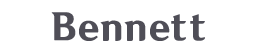
<style>
.page{position:relative;width:256px;height:56px;background:#ffffff}
.page>*{position:absolute;margin:0}
.t1{font:36px "HYWenHei-HEW";color:#4f4e57}
</style>
<div class="page">
<p class="t1" style="left:51px;top:12px;width:154px;height:29px">Bennett</p>
</div>
